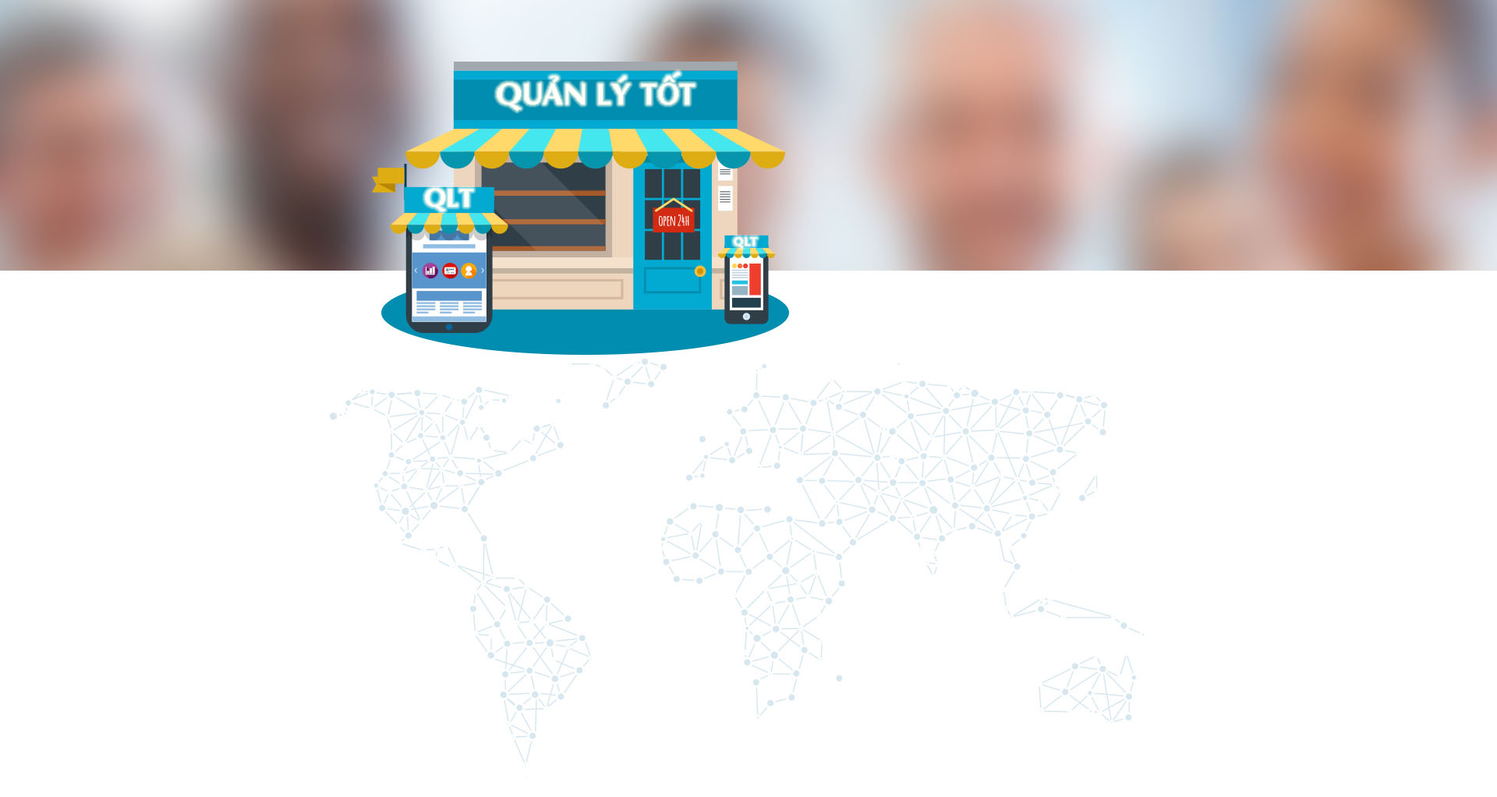
<style>
.page{position:relative;width:1497px;height:797px;background:#ffffff}
.page>*{position:absolute;margin:0}
.t1{font:30.3px "VNI-Aptima-Bold";color:#fffffa}
.t2{font:26px "VNI-Aptima-Bold";color:#fffffa}
.t3{font:11.9px "VNI-Aptima-Bold";color:#fffffa}
</style>
<div class="page">
<p class="t1" style="left:497px;top:72px;width:198px;height:39px">QUAÛN LYÙ TOÁT</p>
<p class="t2" style="left:426px;top:189px;width:47px;height:22px">QLT</p>
<p class="t3" style="left:734px;top:238px;width:23px;height:10px">QLT</p>
</div>
